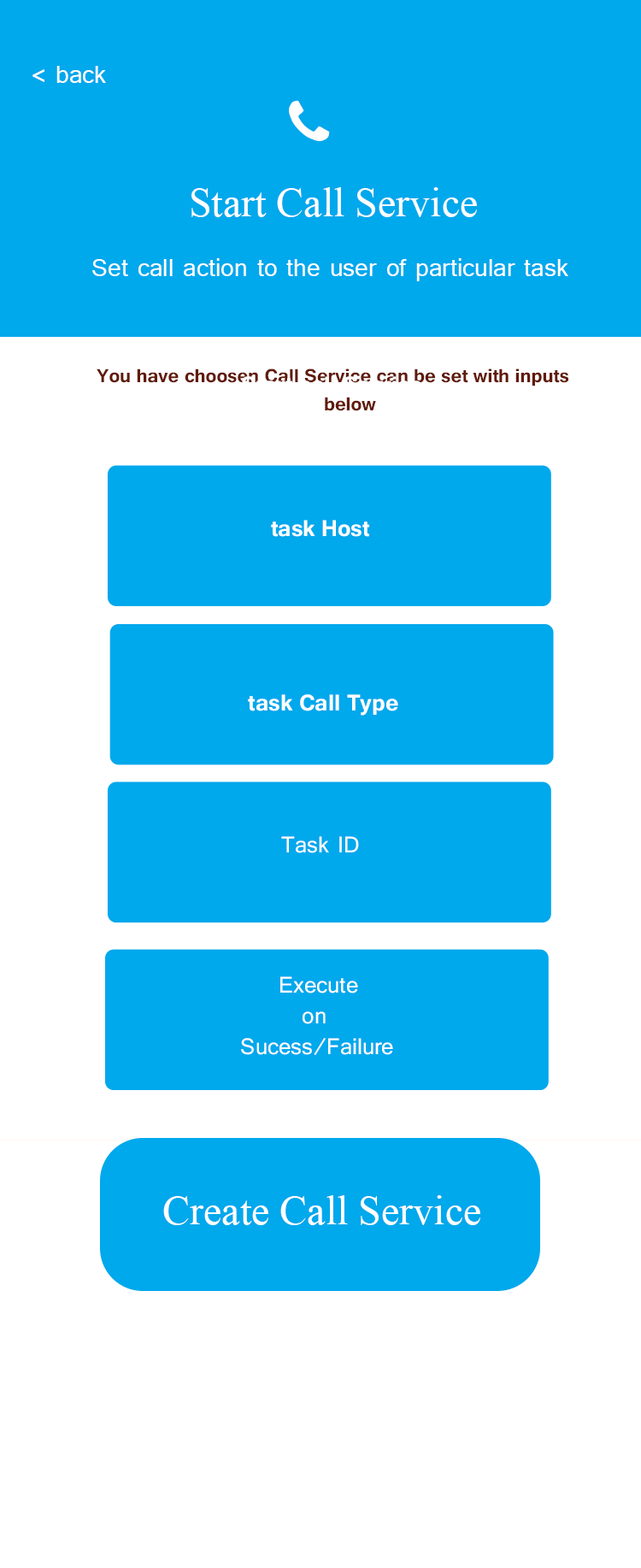
<style>
.page{position:relative;width:641px;height:1568px;background:#00a8ec}
.page>*{position:absolute;margin:0}
.t1{font:30.8px "Tunga";color:#ffffff}
.t2{font:41px "TimesNewRomanPSMT";color:#fefefe}
.t3{font:23.4px "Tunga-Bold";color:#611a07}
.t4{font:28.1px "Tunga-Bold";color:#ffffff}
.t5{font:28.1px "Tunga";color:#ffffff}
.t6{font:28.1px/30.8px "Tunga";color:#ffffff}
.t7{font:41px "TimesNewRomanPSMT";color:#ffffff}
</style>
<div class="page">
<p class="t1" style="left:32px;top:66px;width:74px;height:17px">&lt; back</p>
<p class="t2" style="left:192px;top:187px;width:285px;height:30px">Start Call Service</p>
<p class="t1" style="left:92px;top:258px;width:477px;height:23px">Set call action to the user of particular task</p>
<p class="t3" style="left:97px;top:368px;width:472px;height:43px">You have choosen Call Service can be set with inputs <br>                                          below</p>
<p class="t4" style="left:271px;top:520px;width:98px;height:17px">task Host</p>
<p class="t4" style="left:248px;top:694px;width:150px;height:22px">task Call Type</p>
<p class="t5" style="left:281px;top:836px;width:78px;height:17px">Task ID</p>
<p class="t6" style="left:241px;top:976px;width:152px;height:79px">Execute<br>        on <br> Sucess/Failure</p>
<p class="t7" style="left:163px;top:1195px;width:317px;height:30px">Create Call Service</p>
</div>
